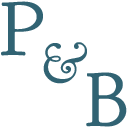
<style>
.page{position:relative;width:128px;height:128px;background:#ffffff}
.page>*{position:absolute;margin:0}
.t1{font:77px "GoudyBookletter1911";letter-spacing:0.045em;color:#316373}
.t2{font:55.7px "GoudyBookletter1911";letter-spacing:0.045em;color:#316373}
</style>
<div class="page">
<p class="t1" style="left:1px;top:1px;width:42px;height:55px">P</p>
<p class="t2" style="left:43px;top:42px;width:44px;height:42px">&amp;</p>
<p class="t1" style="left:86px;top:72px;width:41px;height:55px">B</p>
</div>
